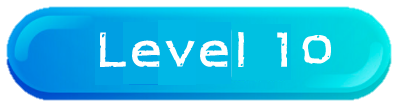
<style>
.page{position:relative;width:397px;height:107px;background:#ffffff}
.page>*{position:absolute;margin:0}
.t1{font:48px "H2mkpB";color:#ffffff}
</style>
<div class="page">
<p class="t1" style="left:100px;top:32px;width:231px;height:35px">Level 10</p>
</div>
